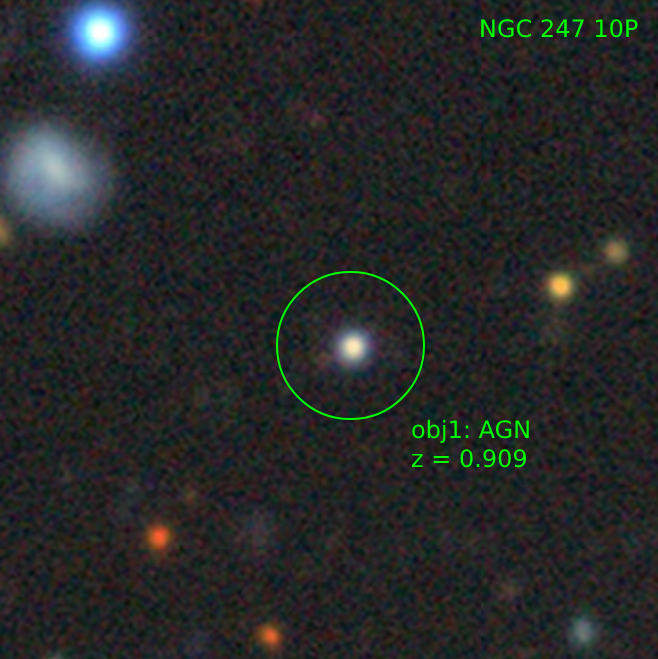
<style>
.page{position:relative;width:658px;height:659px}
.page>*{position:absolute;margin:0}
.t1{font:24px "DejaVuSans";color:#00ff00}
</style>
<div class="page">
<p class="t1" style="left:481px;top:19px;width:157px;height:19px">NGC 247 10P</p>
<p class="t1" style="left:412px;top:419px;width:117px;height:49px">obj1: AGN<br>z = 0.909</p>
</div>
